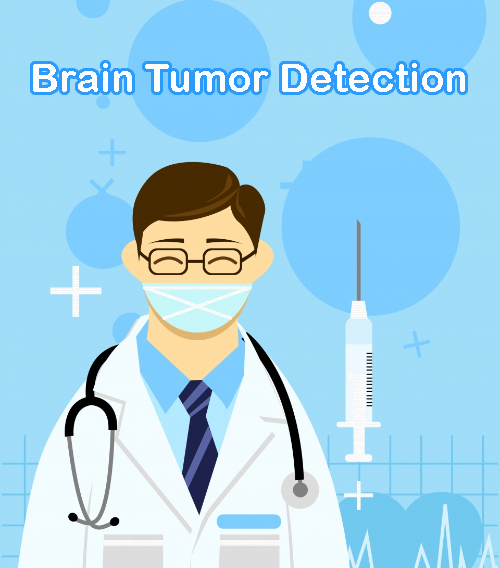
<style>
.page{position:relative;width:500px;height:568px;background:#a0ddf9}
.page>*{position:absolute;margin:0}
.t1{font:40px "ArialRoundedMTBold";color:#ffffff}
</style>
<div class="page">
<p class="t1" style="left:33px;top:63px;width:432px;height:29px;opacity:0.97">Brain Tumor Detection</p>
</div>
